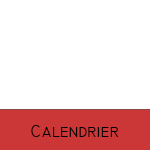
<style>
.page{position:relative;width:150px;height:150px;background:#ffffff}
.page>*{position:absolute;margin:0}
.t1{font:18px "Technic";color:#000000}
</style>
<div class="page">
<p class="t1" style="left:31px;top:125px;width:87px;height:12px">Calendrier</p>
</div>
